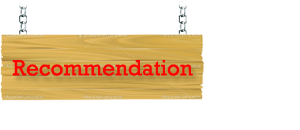
<style>
.page{position:relative;width:300px;height:130px;background:#ffffff}
.page>*{position:absolute;margin:0}
.t1{font:22.4px "Rockwell";color:#ff0100}
</style>
<div class="page">
<p class="t1" style="left:12px;top:59px;width:181px;height:17px">Recommendation</p>
</div>
